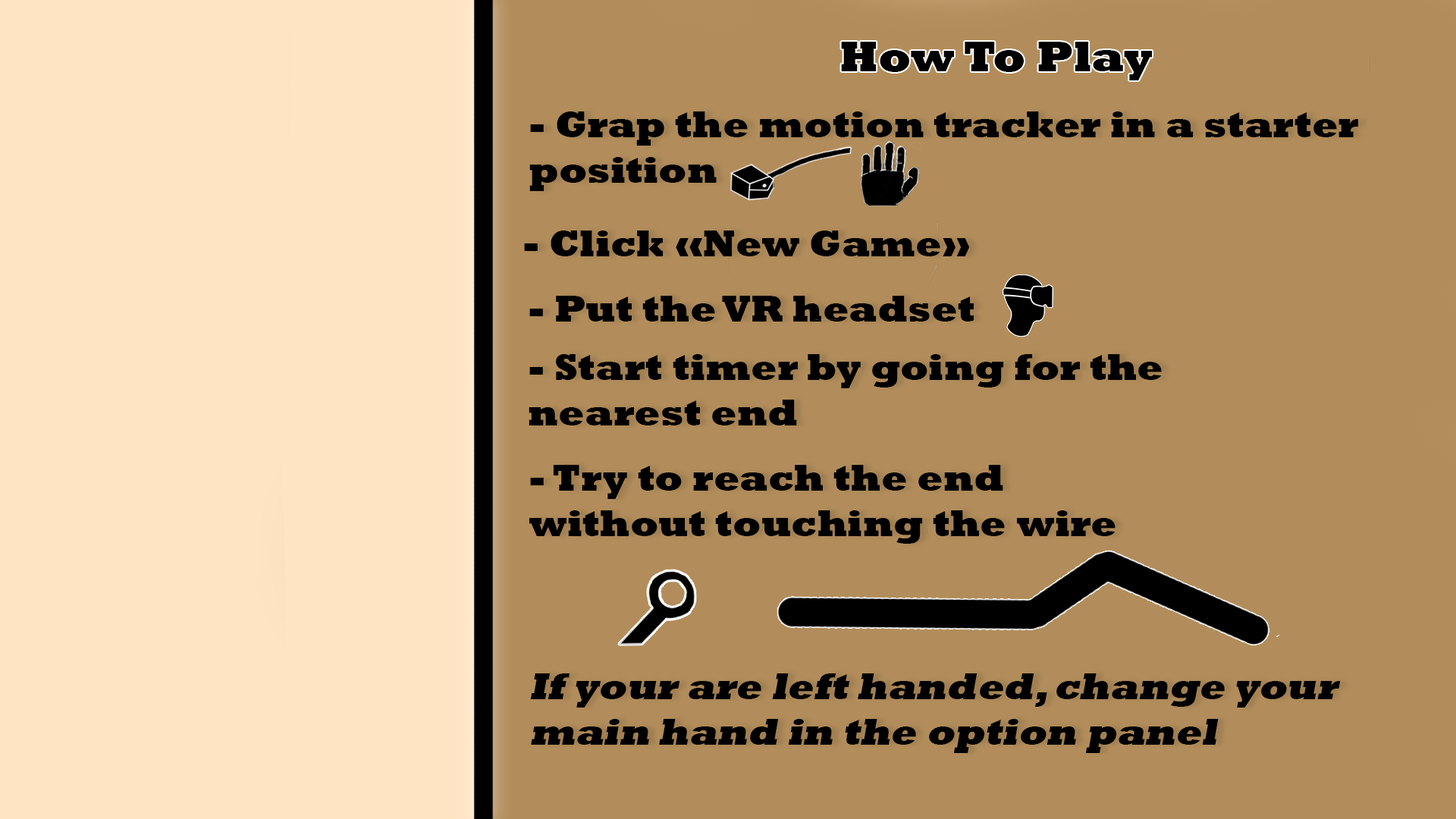
<style>
.page{position:relative;width:1456px;height:819px;background:#b28d5b}
.page>*{position:absolute;margin:0}
.t1{font:44.2px "Rockwell-ExtraBold";color:#000000}
.t2{font:37.9px "Rockwell-ExtraBold";color:#000000}
.t3{font:9.1px "Rockwell-ExtraBold";color:#000000}
.t4{font:37.9px "Rockwell-ExtraBold";color:#000000;font-style:italic}
</style>
<div class="page">
<p class="t1" style="left:841px;top:42px;width:311px;height:38px">How To Play</p>
<p class="t2" style="left:529px;top:111px;width:829px;height:80px">- Grap the motion tracker in a starter position</p>
<p class="t2" style="left:524px;top:231px;width:446px;height:25px">- Click «New Game»</p>
<p class="t2" style="left:529px;top:296px;width:445px;height:26px">- Put the VR headset</p>
<p class="t3" style="left:529px;top:354px;width:633px;height:71px">- Start timer by going for the nearest end</p>
<p class="t3" style="left:529px;top:465px;width:586px;height:79px">- Try to reach the end without touching the wire</p>
<p class="t4" style="left:530px;top:673px;width:811px;height:80px">If your are left handed, change your main hand in the option panel</p>
</div>
